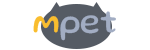
<style>
.page{position:relative;width:150px;height:50px;background:#ffffff}
.page>*{position:absolute;margin:0}
.t1{font:34.6px "GlutenDefault-Regular";color:#a2adc3}
.t2{font:34.6px "GlutenDefault-Regular";color:#f9bd2e}
</style>
<div class="page">
<p class="t1" style="left:33px;top:11px;width:83px;height:30px"><span class="t2">m</span>pet</p>
</div>
